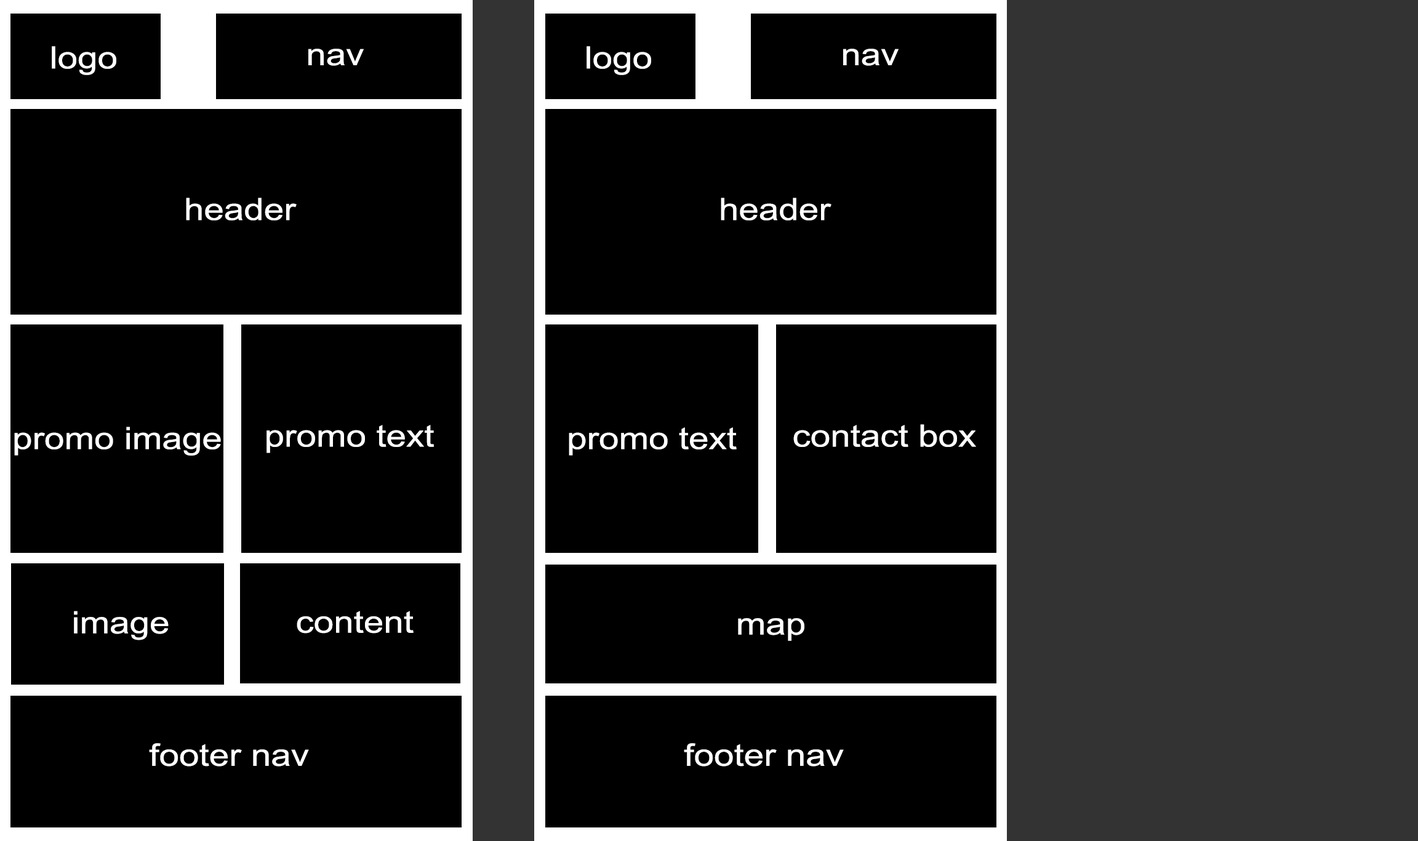
<style>
.page{position:relative;width:1418px;height:841px;background:#000000}
.page>*{position:absolute;margin:0}
.t1{font:30.8px "ArialMT";color:#ffffff;scale:1.17 1}
</style>
<div class="page">
<p class="t1" style="left:52px;top:46px;width:64px;height:29px">logo</p>
<p class="t1" style="left:308px;top:49px;width:56px;height:17px">nav</p>
<p class="t1" style="left:587px;top:46px;width:64px;height:29px">logo</p>
<p class="t1" style="left:843px;top:49px;width:56px;height:17px">nav</p>
<p class="t1" style="left:186px;top:198px;width:111px;height:22px">header</p>
<p class="t1" style="left:721px;top:198px;width:111px;height:22px">header</p>
<p class="t1" style="left:267px;top:425px;width:167px;height:28px">promo text</p>
<p class="t1" style="left:793px;top:424px;width:183px;height:23px">contact box</p>
<p class="t1" style="left:14px;top:427px;width:207px;height:28px">promo image</p>
<p class="t1" style="left:569px;top:427px;width:168px;height:28px">promo text</p>
<p class="t1" style="left:74px;top:611px;width:95px;height:29px">image</p>
<p class="t1" style="left:297px;top:611px;width:117px;height:22px">content</p>
<p class="t1" style="left:738px;top:618px;width:66px;height:23px">map</p>
<p class="t1" style="left:149px;top:743px;width:160px;height:23px">footer nav</p>
<p class="t1" style="left:684px;top:743px;width:160px;height:23px">footer nav</p>
</div>
